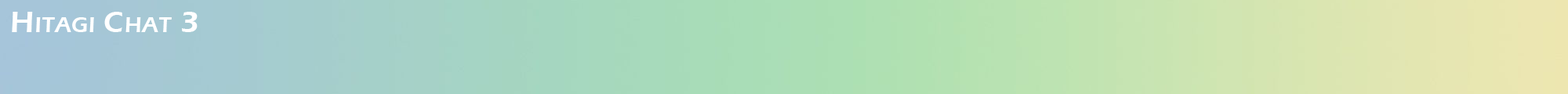
<style>
.page{position:relative;width:1568px;height:94px}
.page>*{position:absolute;margin:0}
.t1{font:30.8px "ErasITC-Demi";letter-spacing:0.025em;color:#ffffff;font-variant:small-caps}
</style>
<div class="page">
<p class="t1" style="left:12px;top:12px;width:186px;height:20px">Hitagi Chat 3</p>
</div>
